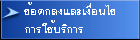
<style>
.page{position:relative;width:140px;height:40px}
.page>*{position:absolute;margin:0}
.t1{font:15.3px/18px "EucrosiaDSE";color:#ffffff;scale:1.12 1}
</style>
<div class="page">
<p class="t1" style="left:24px;top:2px;width:91px;height:31px">¢éÍµ¡Å§áÅÐà§×èÍ¹ä¢<br>¡ÒÃãªéºÃÔ¡ÒÃ</p>
</div>
